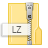
<style>
.page{position:relative;width:48px;height:48px;background:#ffffff}
.page>*{position:absolute;margin:0}
.t1{font:9px "SegoeUI";color:#64635e}
</style>
<div class="page">
<p class="t1" style="left:12px;top:26px;width:10px;height:7px">LZ</p>
</div>
